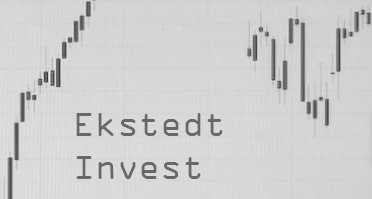
<style>
.page{position:relative;width:372px;height:199px}
.page>*{position:absolute;margin:0}
.t1{font:36px "OCRAExtended";color:#686868}
.t2{font:144px "OCRAExtended";color:#686868}
</style>
<div class="page">
<p class="t1" style="left:76px;top:113px;width:147px;height:66px">Ekstedt<br>Invest<br><span class="t2">InInvest</span></p>
</div>
